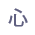
<style>
.page{position:relative;width:35px;height:35px;background:#ffffff}
.page>*{position:absolute;margin:0}
.t1{font:20px "KozGoPr6N-Medium";color:#606080}
</style>
<div class="page">
<p class="t1" style="left:8px;top:8px;width:20px;height:19px">心</p>
</div>
